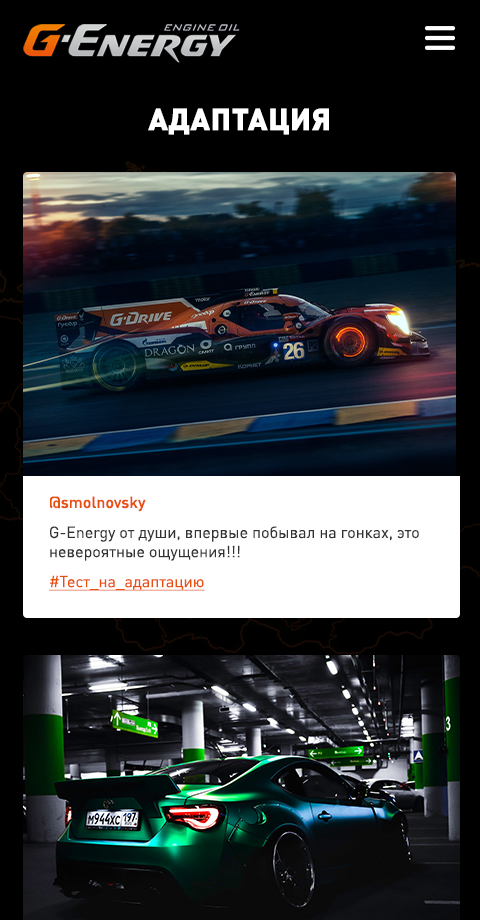
<style>
.page{position:relative;width:480px;height:920px;background:#000000}
.page>*{position:absolute;margin:0}
.t1{font:30px "DINPro-Black";letter-spacing:0.02em;color:#ffffff;text-transform:uppercase}
.t2{font:16px "DINPro-Regular";color:#333333}
.t3{font:16px "DINPro-Medium";color:#e94f0e}
.t4{font:16px/30px "DINPro-Regular";color:#333333}
.t5{font:16px/30px "DINPro-Regular";color:#e94f0e;text-decoration:underline}
.t6{font:16px "DINPro-Regular";color:#e94f0e;text-decoration:underline}
</style>
<div class="page">
<p class="t1" style="left:148px;top:108px;width:181px;height:27px">АДАПТАЦИЯ</p>
<p class="t2" style="left:49px;top:496px;width:370px;height:95px"><span class="t3">@smolnovsky<br></span><span class="t4">G</span>-Energy от души, впервые побывал на гонках, это<br>невероятные ощущения!!!<br><span class="t5">#Т</span><span class="t6">ест_на_адаптацию</span></p>
</div>
